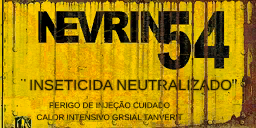
<style>
.page{position:relative;width:256px;height:128px}
.page>*{position:absolute;margin:0}
.t1{font:14.6px "ArialMT";color:#211800}
.t2{font:8px/12px "ArialMT";color:#211800}
</style>
<div class="page">
<p class="t1" style="left:30px;top:79px;width:202px;height:12px">INSETICIDA NEUTRALIZADO</p>
<p class="t2" style="left:36px;top:100px;width:147px;height:21px;text-align:center">PERIGO DE INJEÇÃO CUIDADO<br>CALOR INTENSIVO GRSIAL TANVERIT</p>
</div>
